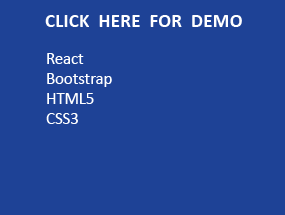
<style>
.page{position:relative;width:285px;height:215px;background:#1e4296}
.page>*{position:absolute;margin:0}
.t1{font:19.4px "Calibri-Bold";color:#ffffff}
.t2{font:16.7px "Calibri";color:#ffffff}
</style>
<div class="page">
<p class="t1" style="left:45px;top:15px;width:197px;height:12px">CLICK  HERE  FOR  DEMO</p>
<p class="t2" style="left:46px;top:53px;width:66px;height:71px">React<br>Bootstrap<br>HTML5<br>CSS3</p>
</div>
